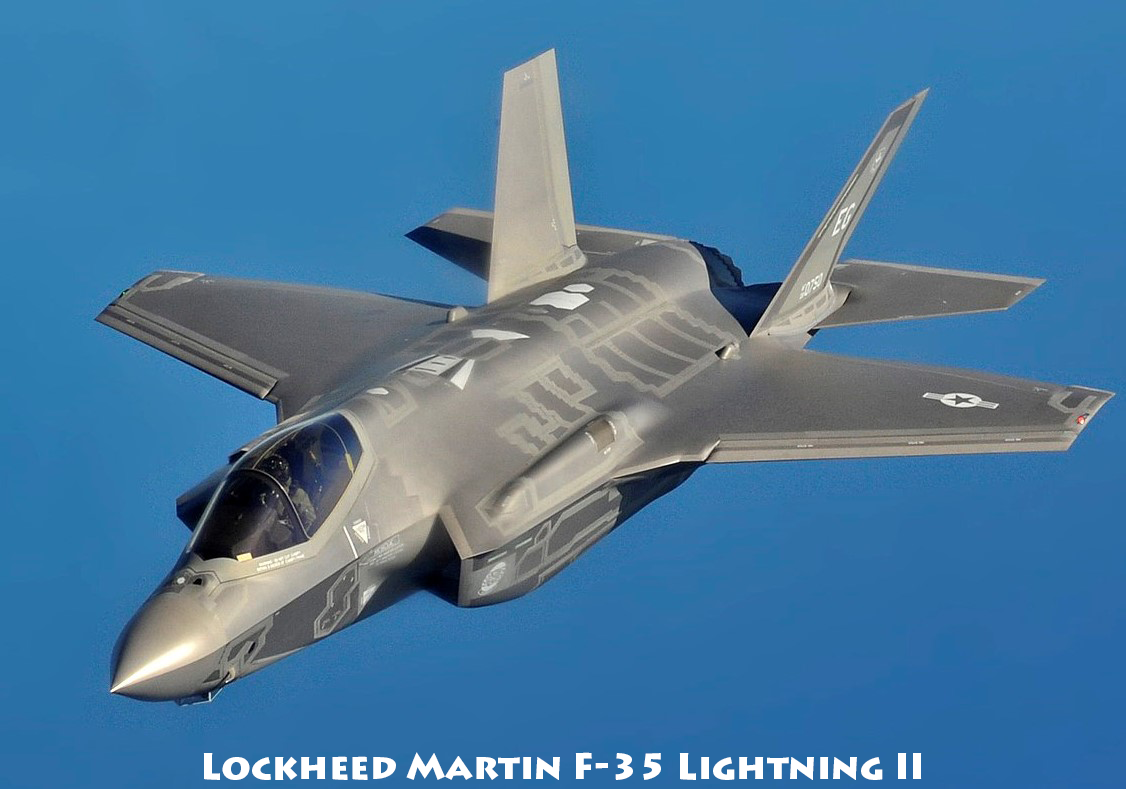
<style>
.page{position:relative;width:1126px;height:789px}
.page>*{position:absolute;margin:0}
.t1{font:36px "LithosPro-Black";color:#ffffff}
</style>
<div class="page">
<p class="t1" style="left:203px;top:752px;width:719px;height:28px">Lockheed Martin F-35 Lightning II</p>
</div>
